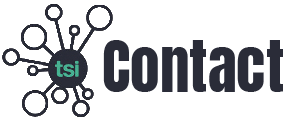
<style>
.page{position:relative;width:285px;height:122px;background:#ffffff}
.page>*{position:absolute;margin:0}
.t1{font:60px "Anton-Regular";color:#2a2c38}
</style>
<div class="page">
<p class="t1" style="left:103px;top:40px;width:180px;height:52px">Contact</p>
</div>
